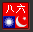
<style>
.page{position:relative;width:33px;height:32px;background:#f20000}
.page>*{position:absolute;margin:0}
.t1{font:10.4px "SimSun";color:#ffffff}
</style>
<div class="page">
<p class="t1" style="left:6px;top:4px;width:19px;height:9px">八六</p>
</div>
